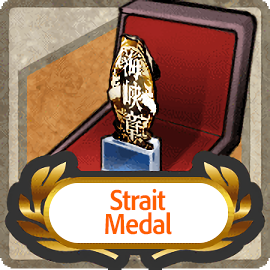
<style>
.page{position:relative;width:270px;height:270px}
.page>*{position:absolute;margin:0}
.t1{font:30px/24px "AdobeClean-Bold";letter-spacing:-0.04em;color:#ff5d00;scale:0.9 1}
</style>
<div class="page">
<p class="t1" style="left:105px;top:188px;width:67px;height:47px;text-align:center">Strait<br>Medal</p>
</div>
